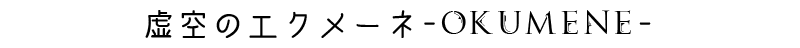
<style>
.page{position:relative;width:800px;height:48px;background:#ffffff}
.page>*{position:absolute;margin:0}
.t1{font:30px "cinecaption";letter-spacing:0.16em;color:#000000}
.t2{font:30px "SWTORTrajan";letter-spacing:0.16em;color:#000000}
</style>
<div class="page">
<p class="t1" style="left:145px;top:10px;width:506px;height:28px">虚空のエクメーネ-<span class="t2">OKUMENE</span>-</p>
</div>
